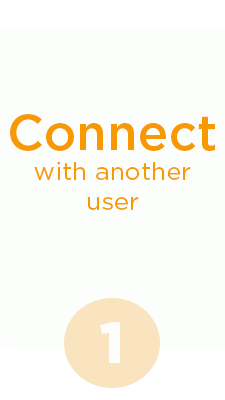
<style>
.page{position:relative;width:225px;height:400px;background:#fbfefa}
.page>*{position:absolute;margin:0}
.t1{font:25px "Gotham-Book";color:#f89904}
.t2{font:50px/41.7px "Gotham-Medium";color:#f89904}
.t3{font:58.3px "Gotham-Black";color:#fdfdfc}
</style>
<div class="page">
<p class="t1" style="left:10px;top:114px;width:205px;height:96px;text-align:center"><span class="t2">Connect<br></span>with another <br>user</p>
<p class="t3" style="left:100px;top:322px;width:20px;height:41px">1</p>
</div>
